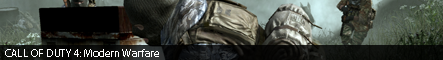
<style>
.page{position:relative;width:443px;height:60px}
.page>*{position:absolute;margin:0}
.t1{font:11.3px "Myriad-Roman";letter-spacing:0.01em;color:#ffffff}
</style>
<div class="page">
<p class="t1" style="left:5px;top:49px;width:154px;height:8px">CALL OF DUTY 4: Modern Warfare</p>
</div>
